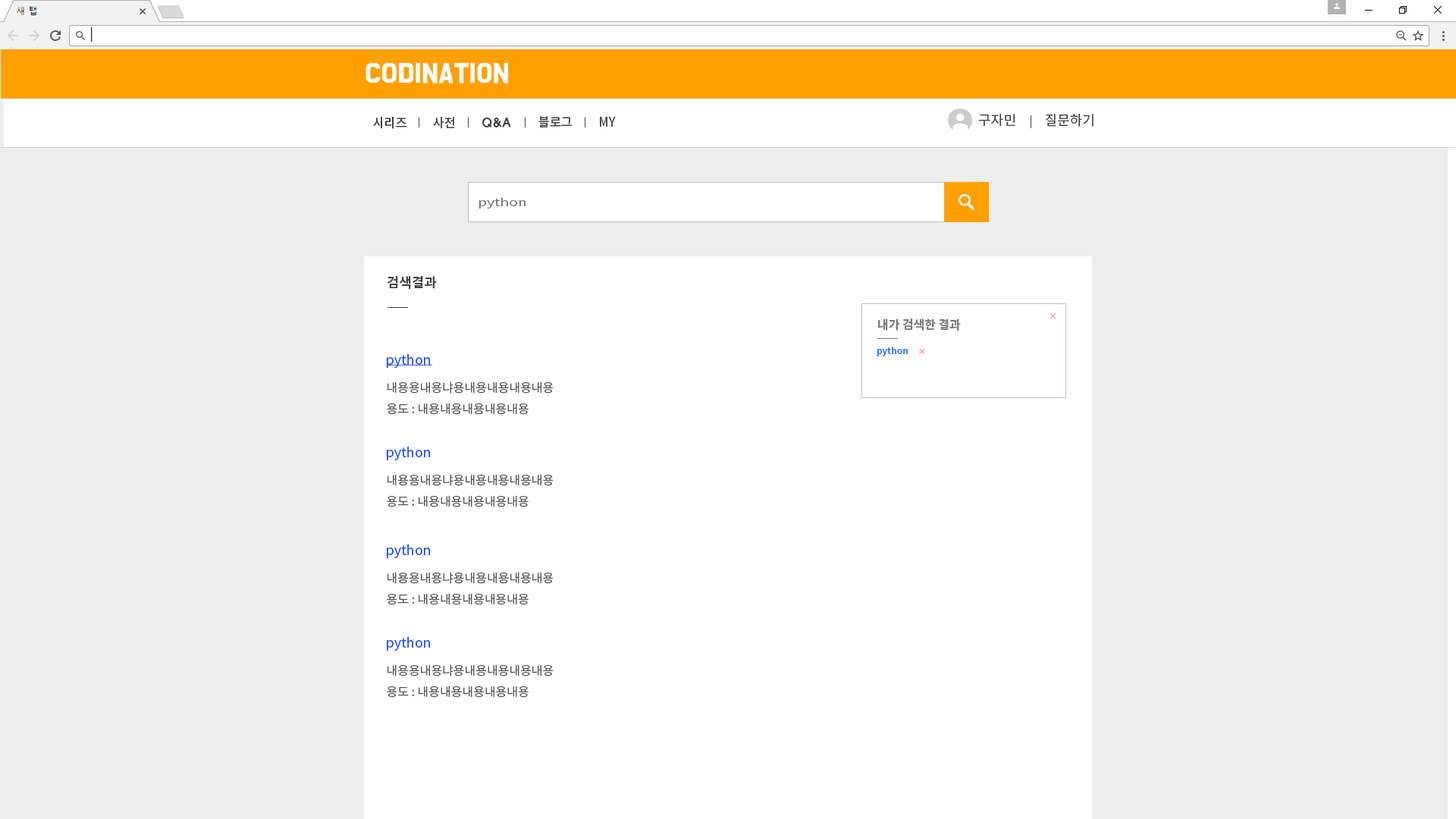
<style>
.page{position:relative;width:1456px;height:819px;background:#ededed}
.page>*{position:absolute;margin:0}
.t1{font:22.7px "BMDoHyeon";color:#ffffff;font-weight:bold}
.t2{font:13.6px "NotoSansCJKkr-Regular";color:#424242}
.t3{font:12.6px "NotoSansCJKkr-Medium";letter-spacing:-0.01em;color:#424242}
.t4{font:12.6px "HYwulB";letter-spacing:-0.025em;color:#424242}
.t5{font:11.3px "NotoSansCJKkr-DemiLight";color:#727272;scale:1.32 1}
.t6{font:13.6px "NotoSansCJKkr-Bold";color:#424242}
.t7{font:12.1px "NotoSansCJKkr-Bold";color:#797979}
.t8{font:13.6px "NotoSansCJKkr-Regular";color:#1a50ff}
.t9{font:9.1px "NotoSansCJKkr-Bold";color:#2471ff}
.t10{font:12.1px "NotoSansCJKkr-Regular";color:#555555}
</style>
<div class="page">
<p class="t1" style="left:366px;top:63px;width:142px;height:20px">CODINATION</p>
<p class="t2" style="left:978px;top:114px;width:37px;height:13px">구자민</p>
<p class="t2" style="left:1046px;top:114px;width:48px;height:13px">질문하기</p>
<p class="t3" style="left:373px;top:117px;width:33px;height:12px">시리즈</p>
<p class="t3" style="left:433px;top:117px;width:22px;height:12px">사전</p>
<p class="t4" style="left:482px;top:118px;width:29px;height:9px">Q&amp;A</p>
<p class="t3" style="left:538px;top:116px;width:34px;height:11px">블로그</p>
<p class="t3" style="left:600px;top:117px;width:16px;height:10px">MY</p>
<p class="t5" style="left:479px;top:197px;width:47px;height:12px">python</p>
<p class="t6" style="left:387px;top:276px;width:50px;height:13px">검색결과</p>
<p class="t7" style="left:878px;top:318px;width:83px;height:13px">내가 검색한 결과</p>
<p class="t8" style="left:387px;top:353px;width:43px;height:15px">python</p>
<p class="t9" style="left:877px;top:347px;width:31px;height:9px">python</p>
<p class="t10" style="left:387px;top:381px;width:167px;height:34px">내용용내용냐용내용내용내용내용<br>용도 : 내용내용내용내용내용</p>
<p class="t8" style="left:387px;top:446px;width:43px;height:14px">python</p>
<p class="t10" style="left:387px;top:474px;width:167px;height:33px">내용용내용냐용내용내용내용내용<br>용도 : 내용내용내용내용내용</p>
<p class="t8" style="left:387px;top:544px;width:43px;height:14px">python</p>
<p class="t10" style="left:387px;top:572px;width:167px;height:33px">내용용내용냐용내용내용내용내용<br>용도 : 내용내용내용내용내용</p>
<p class="t8" style="left:387px;top:636px;width:43px;height:15px">python</p>
<p class="t10" style="left:387px;top:664px;width:167px;height:34px">내용용내용냐용내용내용내용내용<br>용도 : 내용내용내용내용내용</p>
</div>
